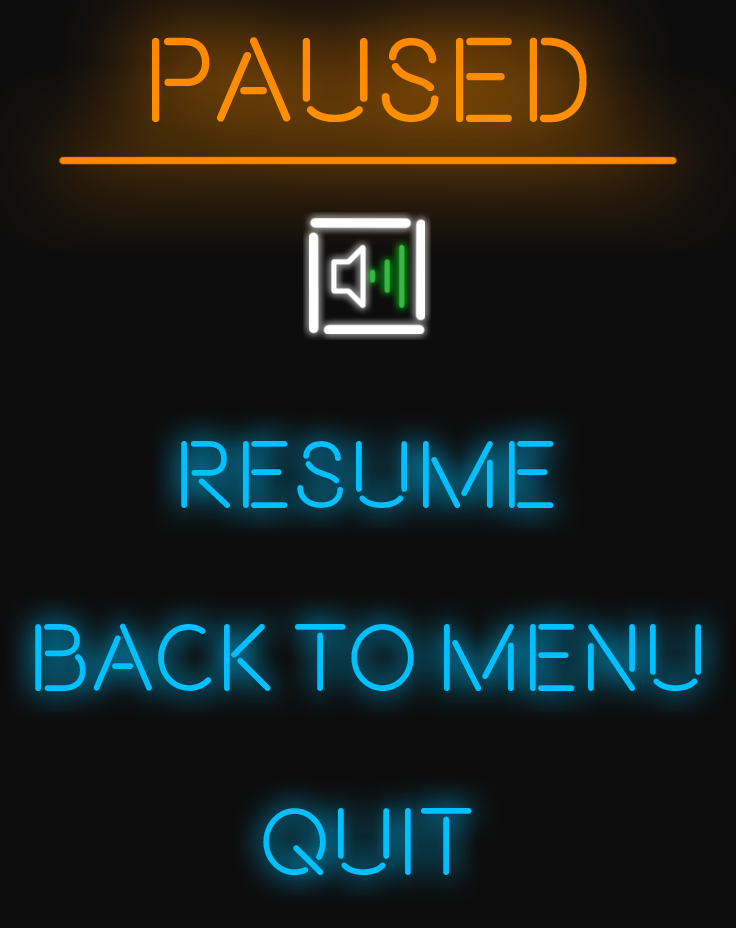
<style>
.page{position:relative;width:736px;height:928px;background:#0d0d0d}
.page>*{position:absolute;margin:0}
.t1{font:120px "Beon-Medium";color:#ff8a00}
.t2{font:95.6px "Beon-Medium";color:#00c0ff}
</style>
<div class="page">
<p class="t1" style="left:152px;top:37px;width:435px;height:86px">Paused</p>
<p class="t2" style="left:181px;top:441px;width:373px;height:67px">Resume</p>
<p class="t2" style="left:35px;top:623px;width:666px;height:68px">Back to Menu</p>
<p class="t2" style="left:263px;top:808px;width:209px;height:68px">Quit</p>
</div>
